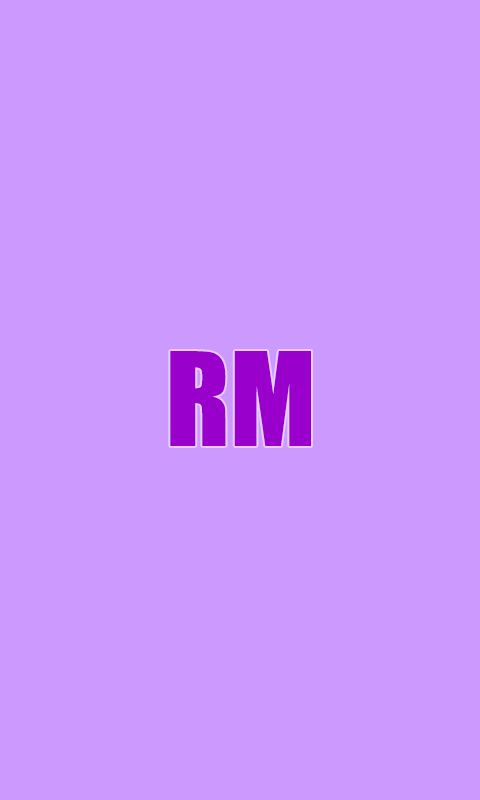
<style>
.page{position:relative;width:480px;height:800px;background:#cc99ff}
.page>*{position:absolute;margin:0}
.t1{font:120px "Impact";color:#9900cc}
</style>
<div class="page">
<p class="t1" style="left:170px;top:351px;width:141px;height:95px">RM</p>
</div>
